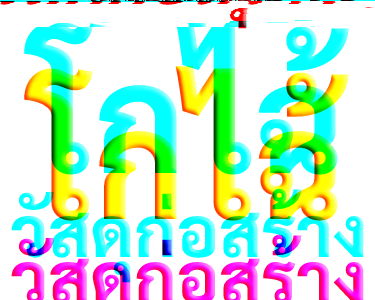
<style>
.page{position:relative;width:375px;height:300px;background:#ffffff}
.page>*{position:absolute;margin:0}
.t1{font:70px "Sarabun-ExtraBold"}
.t2{font:150px "Sarabun-ExtraBold"}
</style>
<div class="page">
<p class="t1" style="left:11px;top:19px;width:353px;height:263px;text-align:center"><span class="t2">โกไฉ้<br></span>วัสดุก่อสร้าง</p>
</div>
